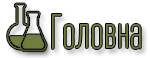
<style>
.page{position:relative;width:150px;height:58px;background:#ffffff}
.page>*{position:absolute;margin:0}
.t1{font:48px "Pharmadin-CondensedLight";color:#6f7d3f}
</style>
<div class="page">
<p class="t1" style="left:52px;top:14px;width:89px;height:35px">Головна</p>
</div>
